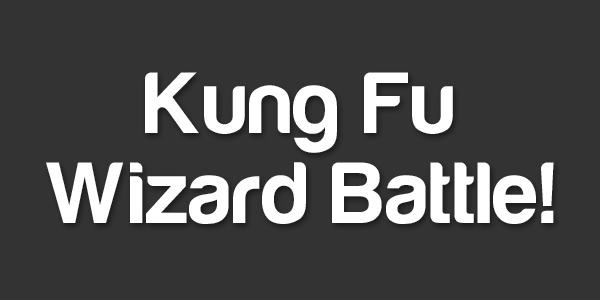
<style>
.page{position:relative;width:600px;height:300px;background:#333333}
.page>*{position:absolute;margin:0}
.t1{font:90px/90px "Harabara-Bold";letter-spacing:0.025em;color:#ffffff}
</style>
<div class="page">
<p class="t1" style="left:46px;top:72px;width:508px;height:152px;text-align:center">Kung Fu<br>Wizard Battle!</p>
</div>
